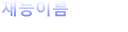
<style>
.page{position:relative;width:128px;height:32px;background:#ffffff}
.page>*{position:absolute;margin:0}
.t1{font:17px "MalgunGothicBold"}
</style>
<div class="page">
<p class="t1" style="left:1px;top:0px;width:67px;height:17px">재능이름</p>
</div>
